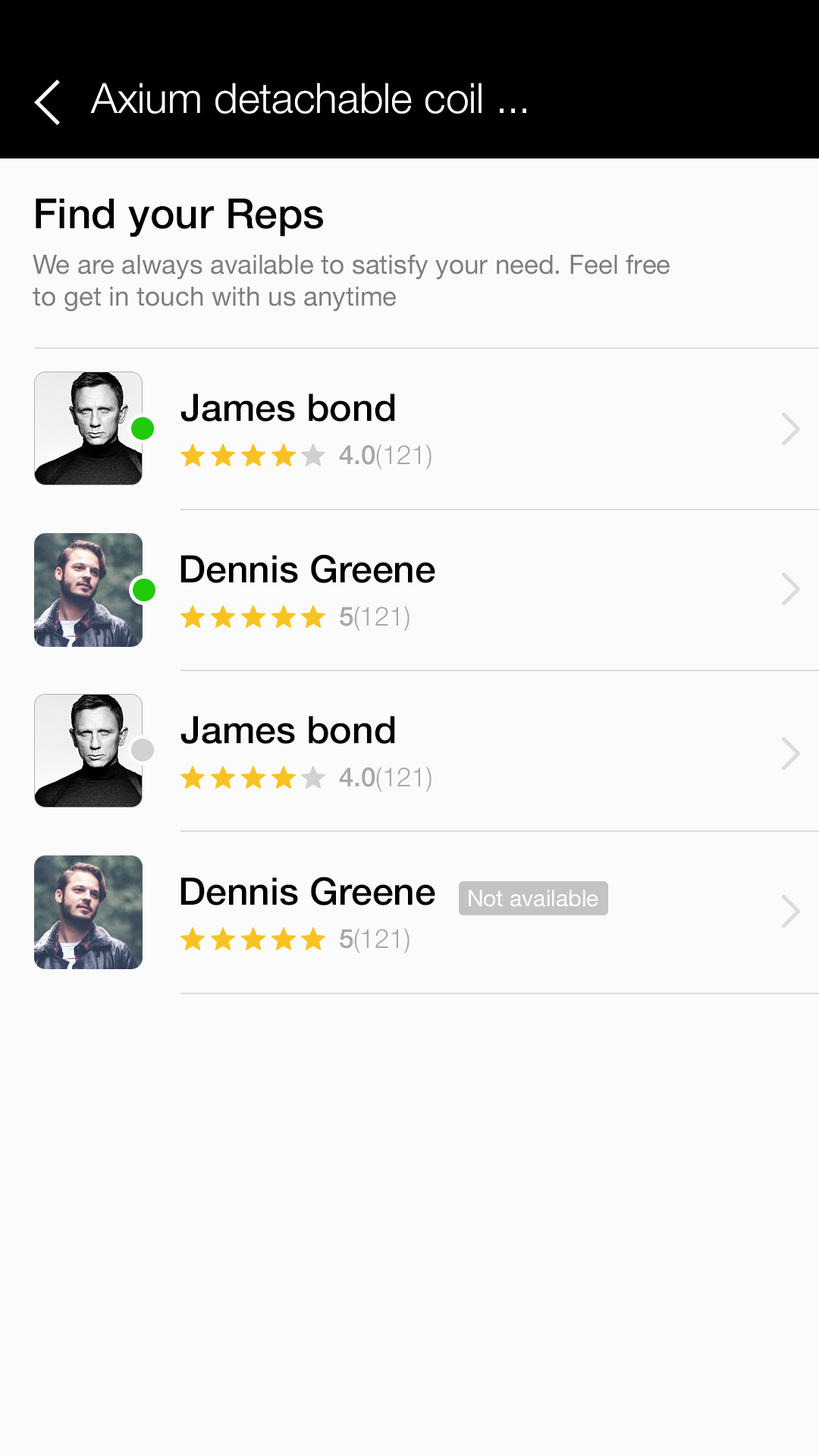
<style>
.page{position:relative;width:819px;height:1456px;background:#fbfbfb}
.page>*{position:absolute;margin:0}
.t1{font:41.7px "HelveticaNeue-Light";color:#ffffff}
.t2{font:41.7px "HelveticaNeue-Medium";color:#000000}
.t3{font:26.5px "HelveticaNeue";color:#7c7c7c}
.t4{font:37.9px "HelveticaNeue-Medium";color:#000000}
.t5{font:26.5px "HelveticaNeue-Light";color:#a7a7a7}
.t6{font:26.5px "HelveticaNeue-Medium";color:#a7a7a7}
.t7{font:22.7px "HelveticaNeue";color:#ffffff}
</style>
<div class="page">
<p class="t1" style="left:90px;top:83px;width:436px;height:31px">Axium detachable coil ...</p>
<p class="t2" style="left:36px;top:198px;width:287px;height:39px">Find your Reps</p>
<p class="t3" style="left:33px;top:254px;width:637px;height:58px">We are always available to satisfy your need. Feel free<br>to get in touch with us anytime</p>
<p class="t4" style="left:180px;top:394px;width:215px;height:28px">James bond</p>
<p class="t5" style="left:339px;top:444px;width:92px;height:25px"><span class="t6">4.0</span>(121)</p>
<p class="t4" style="left:180px;top:554px;width:255px;height:29px">Dennis Greene</p>
<p class="t5" style="left:340px;top:606px;width:69px;height:25px"><span class="t6">5</span>(121)</p>
<p class="t4" style="left:180px;top:716px;width:215px;height:28px">James bond</p>
<p class="t5" style="left:339px;top:767px;width:92px;height:25px"><span class="t6">4.0</span>(121)</p>
<p class="t4" style="left:180px;top:877px;width:255px;height:28px">Dennis Greene</p>
<p class="t7" style="left:469px;top:890px;width:129px;height:17px">Not available</p>
<p class="t5" style="left:340px;top:928px;width:69px;height:25px"><span class="t6">5</span>(121)</p>
</div>
